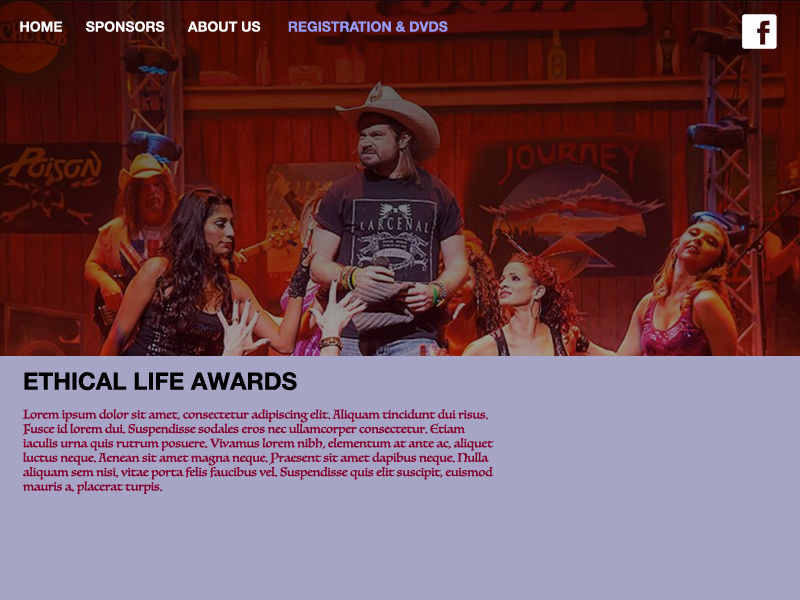
<style>
.page{position:relative;width:800px;height:600px;background:#a6a5c5}
.page>*{position:absolute;margin:0}
.t1{font:14px "HelveticaNeue-Bold";color:#ffffff}
.t2{font:14px "HelveticaNeue-Bold";color:#969afb}
.t3{font:12px "Luminari-Regular";color:#85002c}
.t4{font:24px "HelveticaNeue-Bold";color:#000000}
</style>
<div class="page">
<p class="t1" style="left:20px;top:21px;width:428px;height:11px">HOME      SPONSORS      ABOUT US       <span class="t2">REGISTRATION &amp; DVDS</span></p>
<p class="t3" style="left:22px;top:372px;width:472px;height:123px"><span class="t4">ETHICAL LIFE AWARDS<br><br></span>Lorem ipsum dolor sit amet, consectetur adipiscing elit. Aliquam tincidunt dui risus. <br>Fusce id lorem dui. Suspendisse sodales eros nec ullamcorper consectetur. Etiam <br>iaculis urna quis rutrum posuere. Vivamus lorem nibh, elementum at ante ac, aliquet <br>luctus neque. Aenean sit amet magna neque. Praesent sit amet dapibus neque. Nulla <br>aliquam sem nisi, vitae porta felis faucibus vel. Suspendisse quis elit suscipit, euismod <br>mauris a, placerat turpis.</p>
</div>
